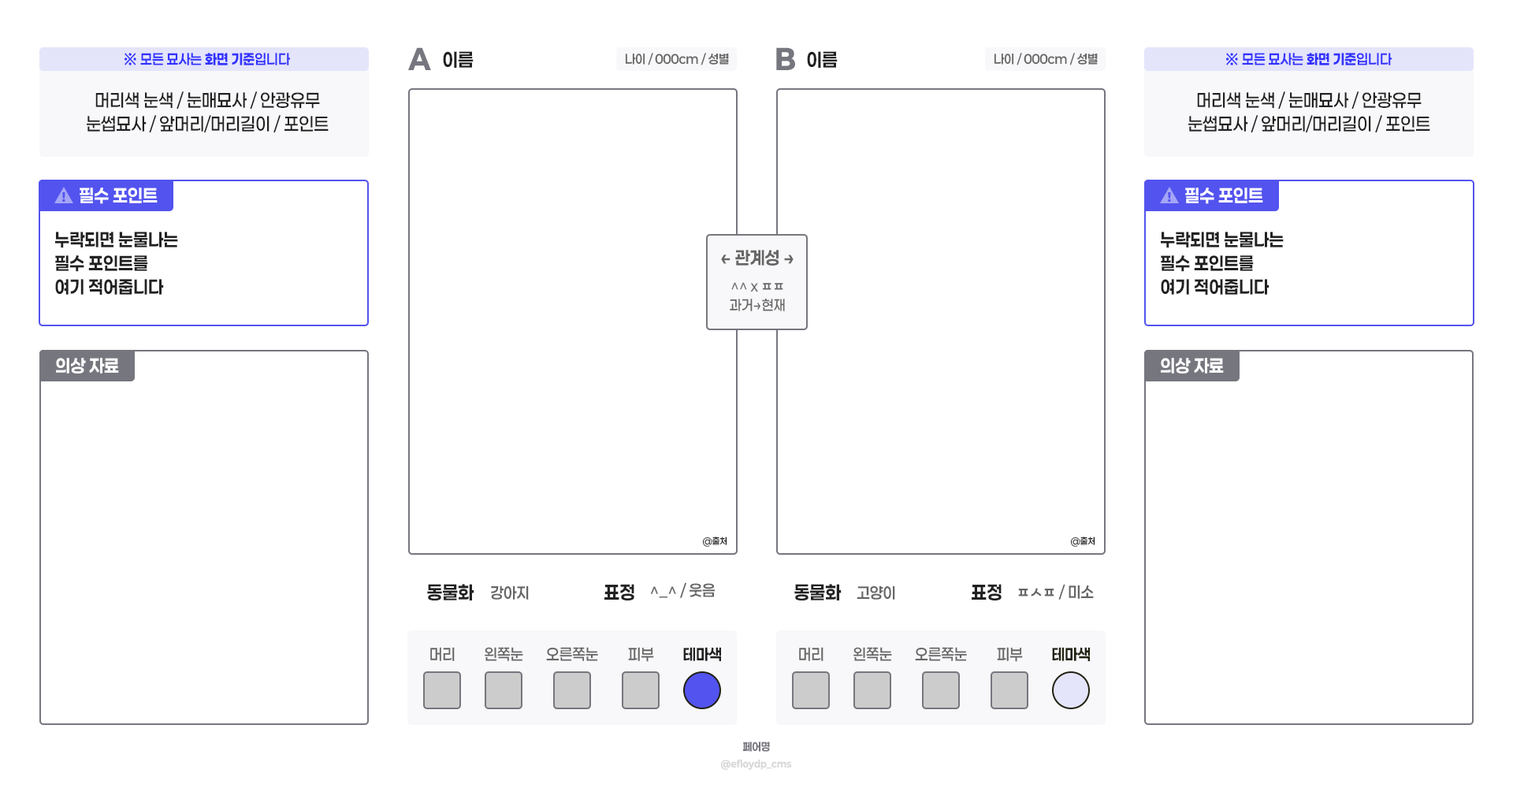
<style>
.page{position:relative;width:1513px;height:788px;background:#ffffff}
.page>*{position:absolute;margin:0}
.t1{font:14.2px "Paperlogy-6SemiBold";color:#3030ff;scale:0.94 1}
.t2{font:14.2px "Paperlogy-8ExtraBold";color:#3030ff;scale:0.94 1}
.t3{font:28.6px "Paperlogy-9Black";color:#76767f;scale:0.94 1}
.t4{font:18.9px "Paperlogy-7Bold";color:#212121;scale:0.94 1}
.t5{font:12.6px "Paperlogy-6SemiBold";color:#666666;scale:0.94 1}
.t6{font:18.1px/23.6px "Paperlogy-5Medium";color:#212121;scale:0.94 1}
.t7{font:18.1px "Paperlogy-7Bold";color:#ffffff;scale:0.94 1}
.t8{font:18.1px/23.6px "Paperlogy-7Bold";color:#212121;scale:0.94 1}
.t9{font:18.1px "Paperlogy-7Bold";color:#666666;scale:0.94 1}
.t10{font:14.2px/18.9px "Paperlogy-5Medium";color:#666666;scale:0.94 1}
.t11{font:9.1px "Paperlogy-5Medium";color:#212121;scale:0.94 1}
.t12{font:15.8px "Paperlogy-6SemiBold";color:#666666;scale:0.94 1}
.t13{font:15.8px "Paperlogy-5Medium";color:#666666;scale:0.94 1}
.t14{font:15.8px "Paperlogy-7Bold";color:#212121;scale:0.94 1}
.t15{font:15.8px "Paperlogy-7Bold";color:#212112;scale:0.94 1}
.t16{font:11px "Paperlogy-7Bold";color:#76767f;scale:0.94 1}
.t17{font:9.5px "Paperlogy-8ExtraBold";color:#d6d6d6;scale:0.94 1}
</style>
<div class="page">
<p class="t1" style="left:125px;top:53px;width:166px;height:12px">※ 모든 묘사는 <span class="t2">화면 기준</span>입니다</p>
<p class="t3" style="left:408px;top:47px;width:23px;height:23px">A</p>
<p class="t4" style="left:443px;top:51px;width:31px;height:17px">이름</p>
<p class="t5" style="left:625px;top:53px;width:104px;height:12px">나이 / 000cm / 성별</p>
<p class="t3" style="left:776px;top:47px;width:19px;height:23px">B</p>
<p class="t4" style="left:807px;top:51px;width:31px;height:17px">이름</p>
<p class="t5" style="left:994px;top:53px;width:104px;height:12px">나이 / 000cm / 성별</p>
<p class="t1" style="left:1226px;top:53px;width:167px;height:12px">※ 모든 묘사는 <span class="t2">화면 기준</span>입니다</p>
<p class="t6" style="left:87px;top:91px;width:242px;height:41px;text-align:center">머리색 눈색 / 눈매묘사 / 안광유무<br>눈썹묘사 / 앞머리/머리길이 / 포인트</p>
<p class="t6" style="left:1188px;top:91px;width:242px;height:41px;text-align:center">머리색 눈색 / 눈매묘사 / 안광유무<br>눈썹묘사 / 앞머리/머리길이 / 포인트</p>
<p class="t7" style="left:80px;top:188px;width:78px;height:16px">필수 포인트</p>
<p class="t7" style="left:1185px;top:188px;width:78px;height:16px">필수 포인트</p>
<p class="t8" style="left:55px;top:232px;width:123px;height:63px">누락되면 눈물나는<br>필수 포인트를<br>여기 적어줍니다</p>
<p class="t8" style="left:1161px;top:232px;width:123px;height:63px">누락되면 눈물나는<br>필수 포인트를<br>여기 적어줍니다</p>
<p class="t9" style="left:721px;top:250px;width:73px;height:16px">← 관계성 →</p>
<p class="t10" style="left:730px;top:282px;width:55px;height:29px;text-align:center">^^ x ㅍㅍ<br>과거→현재</p>
<p class="t7" style="left:56px;top:358px;width:63px;height:16px">의상 자료</p>
<p class="t7" style="left:1161px;top:358px;width:63px;height:16px">의상 자료</p>
<p class="t11" style="left:702px;top:537px;width:25px;height:10px">@출처</p>
<p class="t11" style="left:1070px;top:537px;width:25px;height:10px">@출처</p>
<p class="t4" style="left:427px;top:584px;width:47px;height:17px">동물화</p>
<p class="t12" style="left:491px;top:586px;width:38px;height:14px">강아지</p>
<p class="t4" style="left:604px;top:584px;width:30px;height:17px">표정</p>
<p class="t12" style="left:650px;top:582px;width:65px;height:16px">^_^ / 웃음</p>
<p class="t4" style="left:794px;top:584px;width:48px;height:17px">동물화</p>
<p class="t12" style="left:857px;top:586px;width:38px;height:14px">고양이</p>
<p class="t4" style="left:972px;top:584px;width:30px;height:17px">표정</p>
<p class="t12" style="left:1018px;top:584px;width:76px;height:16px">ㅍㅅㅍ / 미소</p>
<p class="t13" style="left:430px;top:647px;width:25px;height:14px">머리</p>
<p class="t13" style="left:485px;top:647px;width:38px;height:14px">왼쪽눈</p>
<p class="t13" style="left:546px;top:647px;width:52px;height:14px">오른쪽눈</p>
<p class="t13" style="left:628px;top:647px;width:26px;height:15px">피부</p>
<p class="t14" style="left:683px;top:647px;width:38px;height:14px">테마색</p>
<p class="t13" style="left:799px;top:647px;width:25px;height:14px">머리</p>
<p class="t13" style="left:853px;top:647px;width:39px;height:14px">왼쪽눈</p>
<p class="t13" style="left:915px;top:647px;width:52px;height:14px">오른쪽눈</p>
<p class="t13" style="left:997px;top:647px;width:26px;height:15px">피부</p>
<p class="t15" style="left:1052px;top:647px;width:38px;height:14px">테마색</p>
<p class="t16" style="left:742px;top:742px;width:28px;height:10px">페어명</p>
<p class="t17" style="left:720px;top:759px;width:72px;height:11px">@efloydp_cms</p>
</div>
